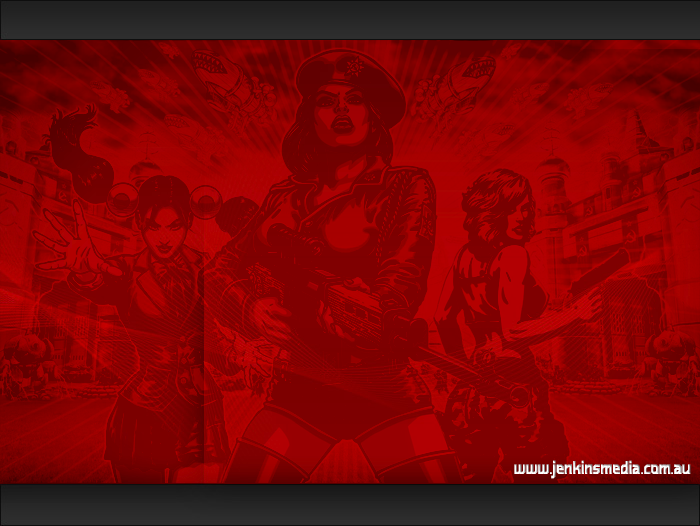
<style>
.page{position:relative;width:700px;height:526px}
.page>*{position:absolute;margin:0}
.t1{font:24px "ZoodRangmah2.1";color:#ffffff}
</style>
<div class="page">
<p class="t1" style="left:514px;top:460px;width:177px;height:19px">www.jenkinsmedia.com.au</p>
</div>
